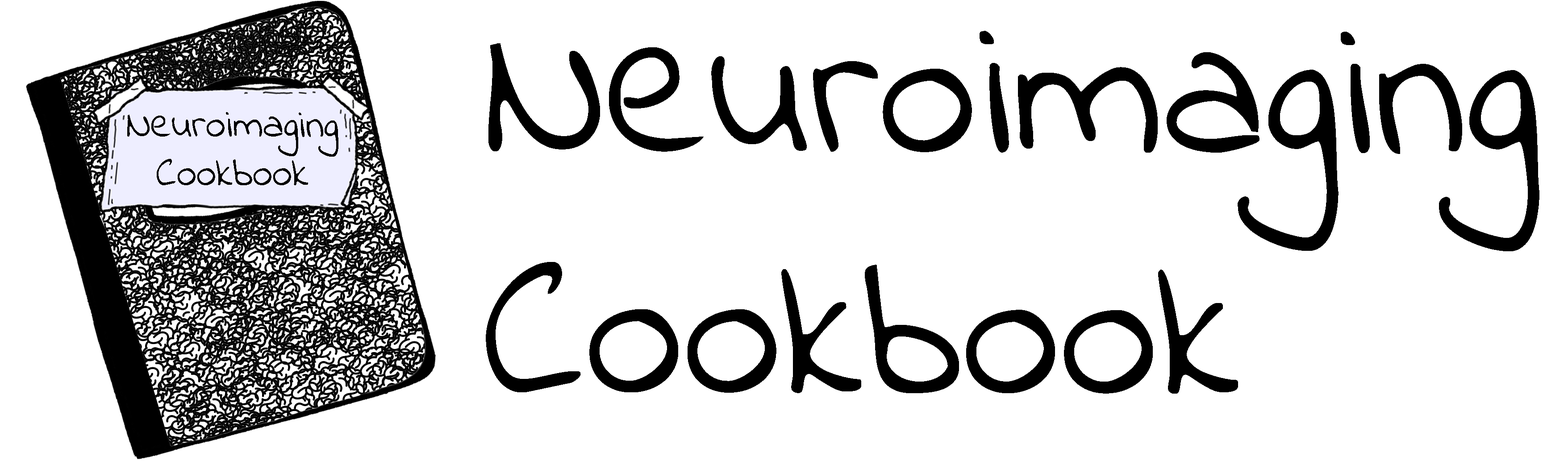
<style>
.page{position:relative;width:1568px;height:461px;background:#ffffff}
.page>*{position:absolute;margin:0}
.t1{font:200.9px "IndieFlower";color:#000000}
.t2{font:40.5px "IndieFlower";color:#000000}
</style>
<div class="page">
<p class="t1" style="left:486px;top:31px;width:1053px;height:363px">Neuroimaging<br>Cookbook</p>
<p class="t2" style="left:127px;top:112px;width:211px;height:73px;text-align:center">Neuroimaging<br>Cookbook</p>
</div>
